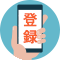
<style>
.page{position:relative;width:60px;height:60px;background:#ffffff}
.page>*{position:absolute;margin:0}
.t1{font:14.5px "Corporate-Logo-Medium";color:#f76031;text-transform:uppercase;font-weight:bold}
</style>
<div class="page">
<p class="t1" style="left:23px;top:13px;width:15px;height:31px;text-align:center">登<br>録</p>
</div>
